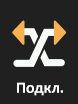
<style>
.page{position:relative;width:78px;height:104px;background:#202020}
.page>*{position:absolute;margin:0}
.t1{font:12px "Calibri-Bold";color:#ffffff}
</style>
<div class="page">
<p class="t1" style="left:17px;top:82px;width:46px;height:14px">Подкл.</p>
</div>
